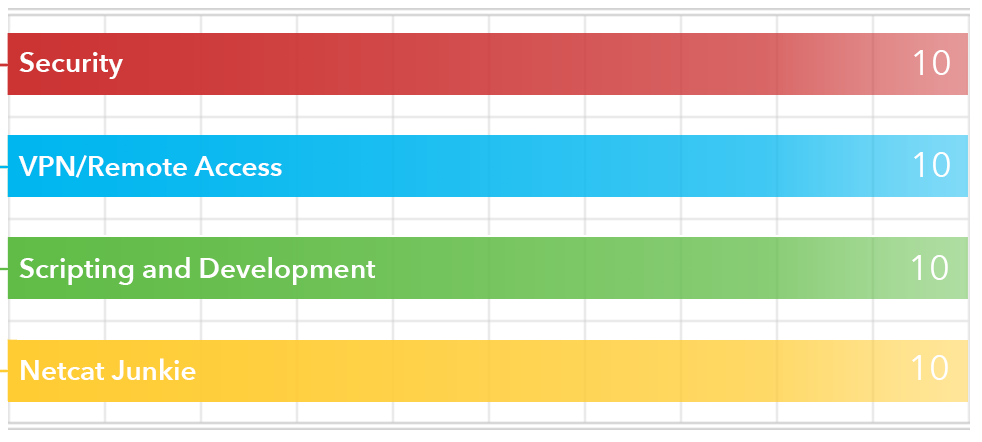
<style>
.page{position:relative;width:982px;height:442px;background:#ffffff}
.page>*{position:absolute;margin:0}
.t1{font:28px "AvenirNext-DemiBold";color:#ffffff}
.t2{font:36px "AvenirNext-Regular";color:#ffffff}
</style>
<div class="page">
<p class="t1" style="left:19px;top:52px;width:104px;height:27px">Security</p>
<p class="t2" style="left:914px;top:50px;width:36px;height:25px">10</p>
<p class="t1" style="left:18px;top:155px;width:264px;height:23px">VPN/Remote Access</p>
<p class="t2" style="left:914px;top:152px;width:36px;height:25px">10</p>
<p class="t1" style="left:19px;top:257px;width:357px;height:28px">Scripting and Development</p>
<p class="t2" style="left:912px;top:255px;width:36px;height:25px">10</p>
<p class="t1" style="left:21px;top:358px;width:175px;height:22px">Netcat Junkie</p>
<p class="t2" style="left:912px;top:355px;width:36px;height:25px">10</p>
</div>
